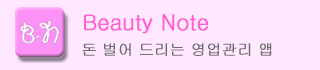
<style>
.page{position:relative;width:320px;height:70px;background:#ffe7ff}
.page>*{position:absolute;margin:0}
.t1{font:21.7px "New-Gulim";letter-spacing:-0.01em;color:#ff5ed0;font-weight:bold}
.t2{font:15.2px "New-Gulim";letter-spacing:-0.01em;color:#6e6e6e;font-weight:bold}
</style>
<div class="page">
<p class="t1" style="left:84px;top:14px;width:125px;height:20px">Beauty Note</p>
<p class="t2" style="left:82px;top:43px;width:190px;height:13px">돈 벌어 드리는 영업관리 앱</p>
</div>
